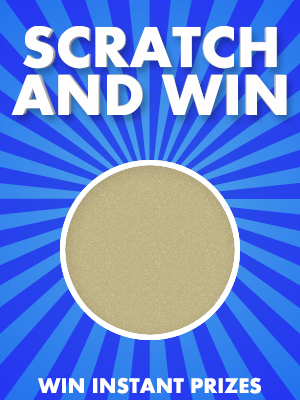
<style>
.page{position:relative;width:300px;height:400px}
.page>*{position:absolute;margin:0}
.t1{font:60px/48px "Aharoni-Bold";letter-spacing:0.006em;color:#fefefe}
.t2{font:22px "Aharoni-Bold";letter-spacing:0.006em;color:#ffffff}
</style>
<div class="page">
<p class="t1" style="left:11px;top:26px;width:276px;height:89px;text-align:center">SCRATCH<br>AND WIN</p>
<p class="t2" style="left:38px;top:377px;width:223px;height:17px">WIN INSTANT PRIZES</p>
</div>
